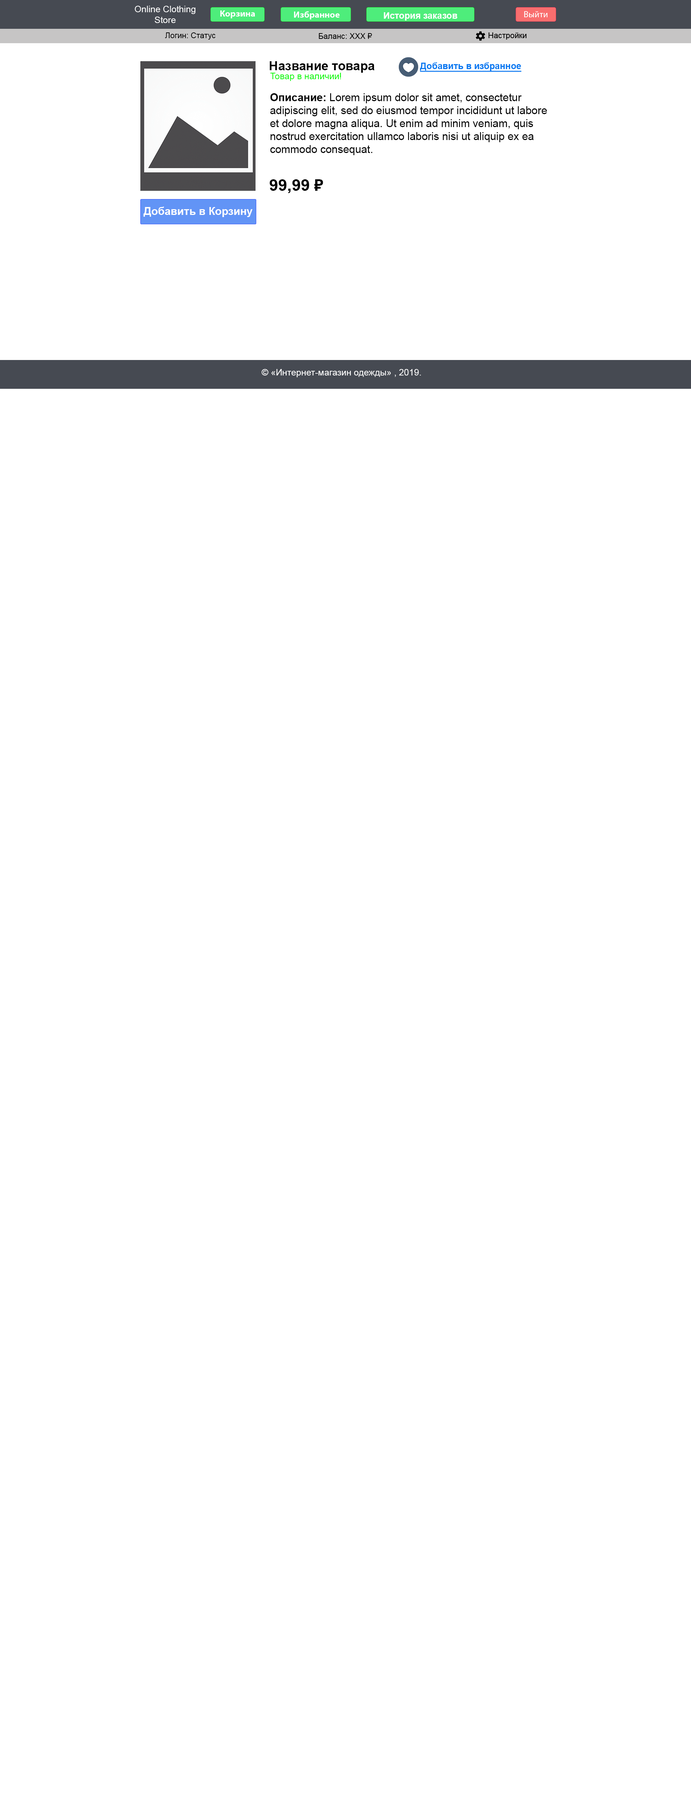
<style>
.page{position:relative;width:691px;height:1800px;background:#ffffff}
.page>*{position:absolute;margin:0}
.t1{font:9px "ArialMT";color:#ffffff}
.t2{font:7.9px "ArialMT";color:#000000}
.t3{font:12.6px "Arial-BoldMT";color:#000000}
.t4{font:9px "ArialMT";color:#0bf706}
.t5{font:10.8px "ArialMT";color:#000000}
.t6{font:10.8px "Arial-BoldMT";color:#000000}
.t7{font:16.2px "Arial-BoldMT";color:#000000}
</style>
<div class="page">
<p class="t1" style="left:135px;top:6px;width:60px;height:17px;text-align:center">Online Clothing<br>Store</p>
<p class="t2" style="left:165px;top:32px;width:51px;height:8px">Логин: Статус</p>
<p class="t2" style="left:319px;top:33px;width:53px;height:6px">Баланс: XXX ₽</p>
<p class="t3" style="left:270px;top:61px;width:105px;height:12px">Название товара</p>
<p class="t4" style="left:270px;top:73px;width:71px;height:8px">Товар в наличии!</p>
<p class="t5" style="left:270px;top:93px;width:277px;height:62px"><span class="t6">Описание:</span> Lorem ipsum dolor sit amet, consectetur <br>adipiscing elit, sed do eiusmod tempor incididunt ut labore <br>et dolore magna aliqua. Ut enim ad minim veniam, quis <br>nostrud exercitation ullamco laboris nisi ut aliquip ex ea <br>commodo consequat.</p>
<p class="t7" style="left:270px;top:179px;width:53px;height:14px">99,99 ₽</p>
<p class="t1" style="left:262px;top:369px;width:159px;height:8px">© «Интернет-магазин одежды» , 2019.</p>
</div>
